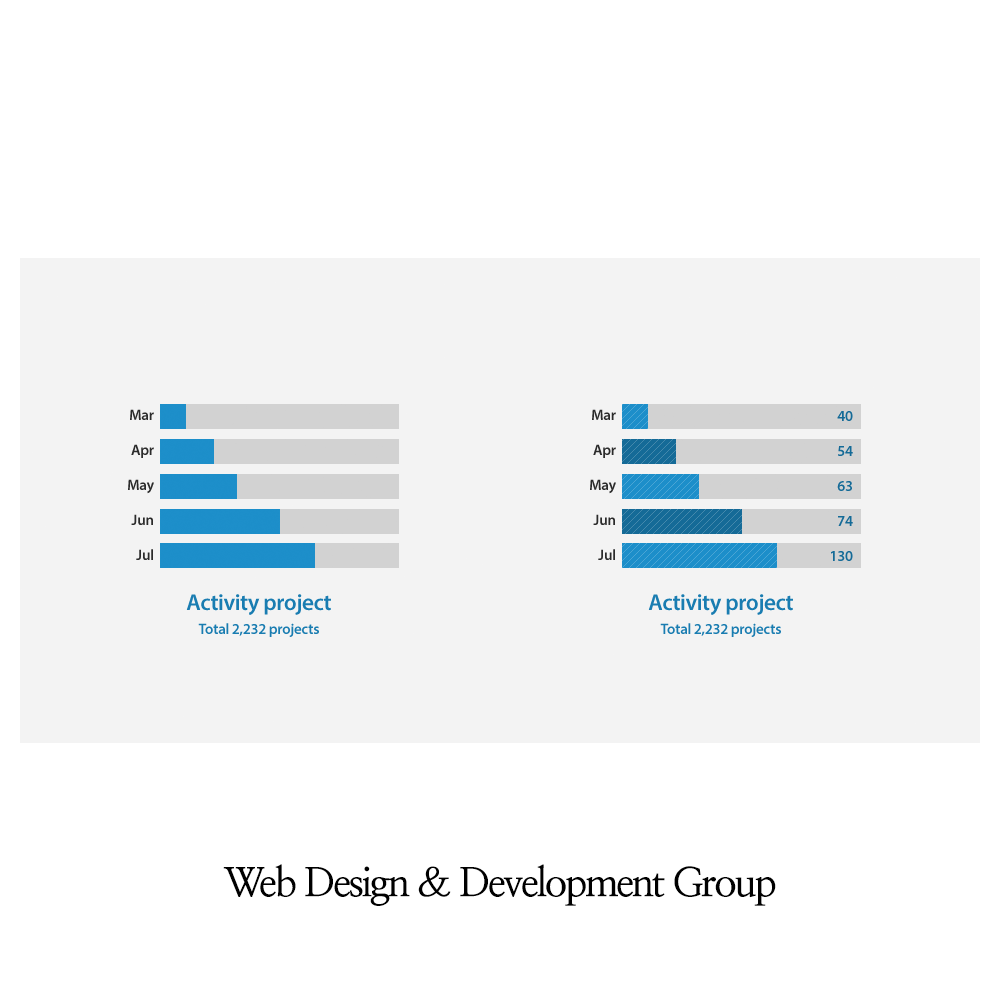
<style>
.page{position:relative;width:1000px;height:1000px;background:#ffffff}
.page>*{position:absolute;margin:0}
.t1{font:15px/35px "MyriadPro-Semibold";letter-spacing:-0.02em;color:#2b2b2b}
.t2{font:15px/35px "MyriadPro-Semibold";letter-spacing:-0.02em;color:#0f6b99}
.t3{font:15px/24px "MyriadPro-Semibold";letter-spacing:-0.02em;color:#127db3}
.t4{font:23px/24px "MyriadPro-Semibold";letter-spacing:-0.02em;color:#127db3}
.t5{font:40px "NanumMyeongjoBold";letter-spacing:-0.06em;color:#000000}
</style>
<div class="page">
<p class="t1" style="left:128px;top:409px;width:26px;height:151px;text-align:right">Mar<br>Apr<br>May<br>Jun<br>Jul</p>
<p class="t1" style="left:590px;top:409px;width:26px;height:151px;text-align:right">Mar<br>Apr<br>May<br>Jun<br>Jul</p>
<p class="t2" style="left:831px;top:411px;width:22px;height:150px;text-align:right">40<br>54<br>63<br>74<br>130</p>
<p class="t3" style="left:186px;top:594px;width:145px;height:43px;text-align:center"><span class="t4">Activity project<br></span>Total 2,232 projects</p>
<p class="t3" style="left:648px;top:594px;width:145px;height:43px;text-align:center"><span class="t4">Activity project<br></span>Total 2,232 projects</p>
<p class="t5" style="left:223px;top:864px;width:553px;height:42px">Web Design &amp; Development Group</p>
</div>
